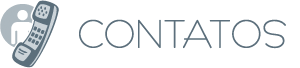
<style>
.page{position:relative;width:300px;height:68px;background:#ffffff}
.page>*{position:absolute;margin:0}
.t1{font:30px "BernhardFashionBT-Regular";color:#5c6f7c;font-weight:bold}
</style>
<div class="page">
<p class="t1" style="left:79px;top:19px;width:207px;height:30px">CONTATOS</p>
</div>
